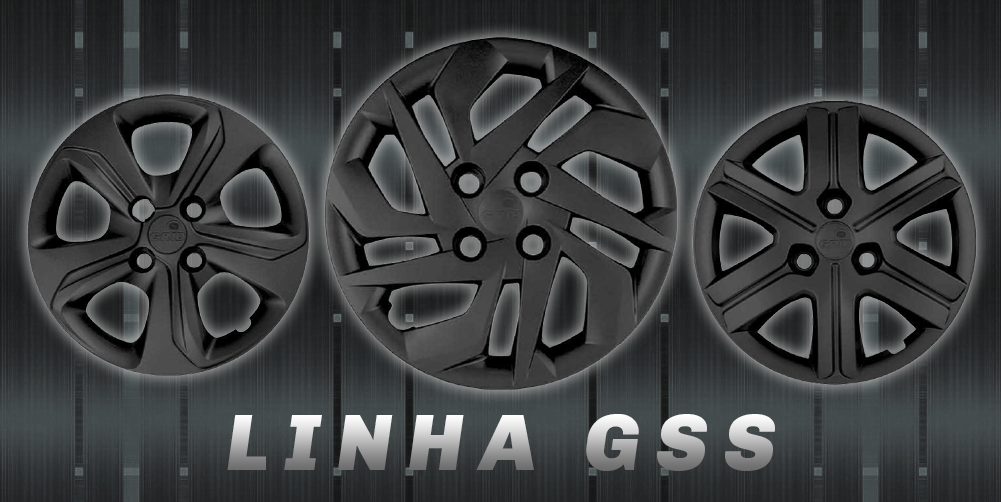
<style>
.page{position:relative;width:1001px;height:502px}
.page>*{position:absolute;margin:0}
.t1{font:80px "Chivo-BlackItalic";letter-spacing:0.2em}
</style>
<div class="page">
<p class="t1" style="left:227px;top:414px;width:548px;height:57px">LINHA GSS</p>
</div>
